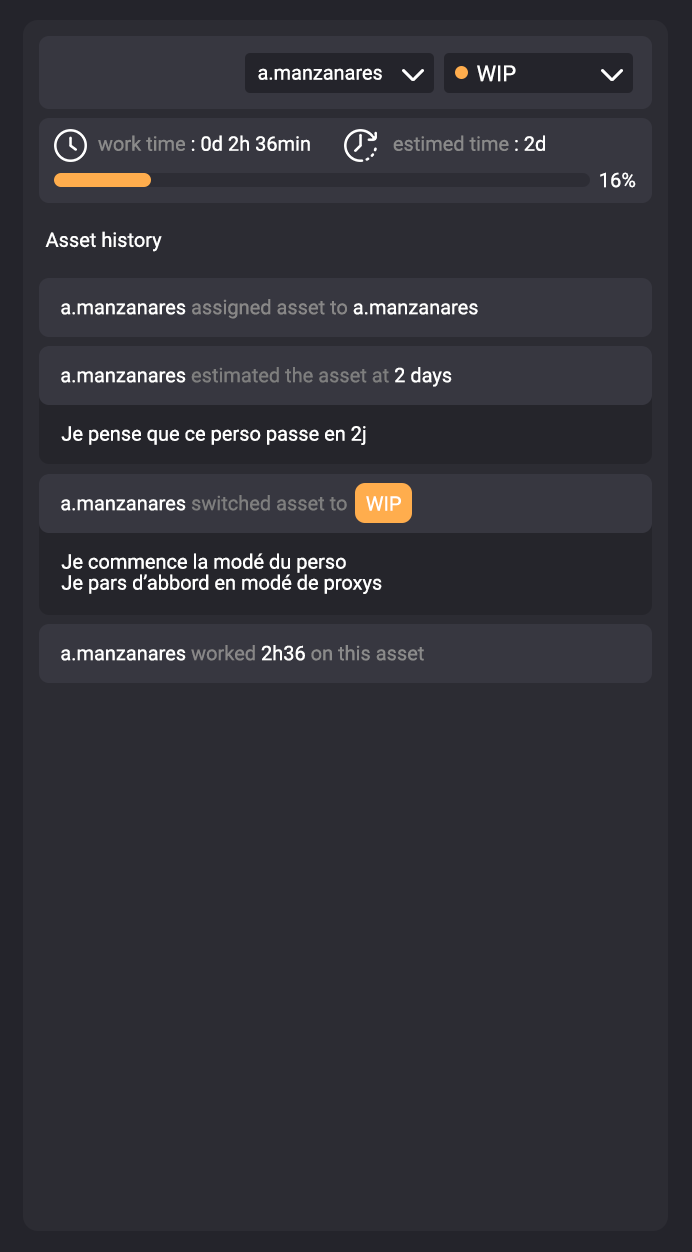
<style>
.page{position:relative;width:692px;height:1252px;background:#2c2c33}
.page>*{position:absolute;margin:0}
.t1{font:22.1px "Roboto-Regular";color:#ffffff}
.t2{font:19.9px "Roboto-Regular";color:#ffffff}
.t3{font:20px "Roboto-Regular";color:#ffffff}
.t4{font:20px "Roboto-Regular";color:#8a8a8a}
.t5{font:20px "Roboto-Regular";color:#888787}
.t6{font:20px "Roboto-Regular";color:#7e7e7e}
.t7{font:20px/21px "Roboto-Regular";color:#ffffff}
</style>
<div class="page">
<p class="t1" style="left:477px;top:65px;width:39px;height:17px">WIP</p>
<p class="t2" style="left:258px;top:68px;width:124px;height:12px">a.manzanares</p>
<p class="t3" style="left:98px;top:135px;width:212px;height:16px"><span class="t4">work time</span> : 0d 2h 36min</p>
<p class="t4" style="left:393px;top:135px;width:152px;height:16px">estimed time<span class="t3"> : 2d</span></p>
<p class="t3" style="left:600px;top:172px;width:36px;height:16px">16%</p>
<p class="t3" style="left:45px;top:231px;width:117px;height:21px">Asset history</p>
<p class="t5" style="left:61px;top:299px;width:417px;height:20px"><span class="t3">a.manzanares </span>assigned asset to<span class="t3"> a.manzanares</span></p>
<p class="t6" style="left:61px;top:367px;width:391px;height:20px"><span class="t3">a.manzanares </span>estimated the asset at <span class="t3">2 days</span></p>
<p class="t3" style="left:61px;top:426px;width:305px;height:19px">Je pense que ce perso passe en 2j</p>
<p class="t6" style="left:61px;top:495px;width:286px;height:16px"><span class="t3">a.manzanares </span>switched asset to</p>
<p class="t3" style="left:366px;top:496px;width:35px;height:15px">WIP</p>
<p class="t7" style="left:61px;top:553px;width:321px;height:41px">Je commence la modé du perso<br>Je pars d’abbord en modé de proxys</p>
<p class="t4" style="left:61px;top:645px;width:363px;height:16px"><span class="t3">a.manzanares </span><span class="t5">worked</span><span class="t3"> 2h36 </span>on this asset</p>
</div>
